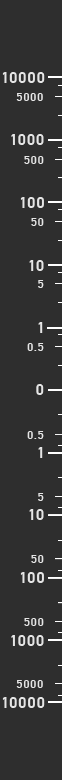
<style>
.page{position:relative;width:64px;height:780px;background:#2e2e2e}
.page>*{position:absolute;margin:0}
.t1{font:16px "PFDinTextPro-Medium";letter-spacing:0.05em;color:#e5e5e5;text-transform:uppercase}
.t2{font:12px "PFDinTextPro-Medium";letter-spacing:0.05em;color:#e5e5e5;text-transform:uppercase}
</style>
<div class="page">
<p class="t1" style="left:2px;top:72px;width:43px;height:11px">10000</p>
<p class="t2" style="left:16px;top:93px;width:27px;height:8px">5000</p>
<p class="t1" style="left:11px;top:134px;width:33px;height:11px">1000</p>
<p class="t2" style="left:24px;top:156px;width:20px;height:8px">500</p>
<p class="t1" style="left:20px;top:197px;width:24px;height:11px">100</p>
<p class="t2" style="left:31px;top:218px;width:13px;height:8px">50</p>
<p class="t1" style="left:29px;top:260px;width:15px;height:11px">10</p>
<p class="t2" style="left:38px;top:280px;width:6px;height:8px">5</p>
<p class="t1" style="left:38px;top:322px;width:5px;height:11px">1</p>
<p class="t2" style="left:27px;top:343px;width:17px;height:8px">0.5</p>
<p class="t1" style="left:36px;top:384px;width:8px;height:11px">0</p>
<p class="t2" style="left:27px;top:431px;width:17px;height:8px">0.5</p>
<p class="t1" style="left:38px;top:447px;width:5px;height:11px">1</p>
<p class="t2" style="left:38px;top:493px;width:6px;height:8px">5</p>
<p class="t1" style="left:29px;top:509px;width:15px;height:11px">10</p>
<p class="t2" style="left:31px;top:555px;width:13px;height:8px">50</p>
<p class="t1" style="left:20px;top:572px;width:24px;height:11px">100</p>
<p class="t2" style="left:24px;top:618px;width:20px;height:8px">500</p>
<p class="t1" style="left:11px;top:635px;width:33px;height:11px">1000</p>
<p class="t2" style="left:16px;top:680px;width:27px;height:8px">5000</p>
<p class="t1" style="left:2px;top:697px;width:43px;height:11px">10000</p>
</div>
